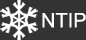
<style>
.page{position:relative;width:86px;height:40px;background:#333333}
.page>*{position:absolute;margin:0}
.t1{font:20px "ArialMT";color:#ffffff}
</style>
<div class="page">
<p class="t1" style="left:42px;top:13px;width:44px;height:15px">NTIP</p>
</div>
